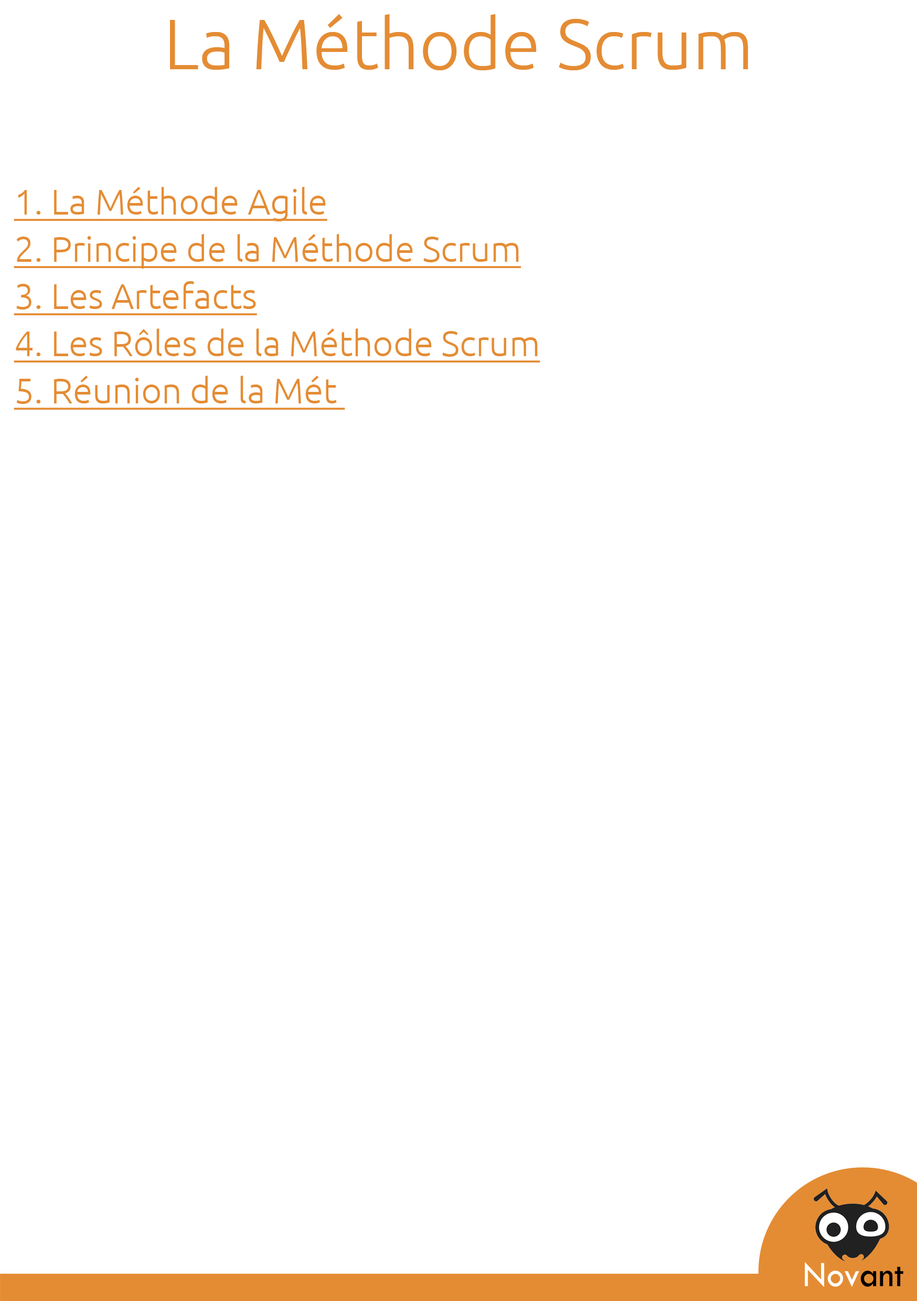
<style>
.page{position:relative;width:917px;height:1301px;background:#ffffff}
.page>*{position:absolute;margin:0}
.t1{font:70.8px "Ubuntu-Light";color:#e48c34}
.t2{font:35.4px "Ubuntu-Light";color:#e48c34;text-decoration:underline}
</style>
<div class="page">
<p class="t1" style="left:170px;top:14px;width:578px;height:56px">La Méthode Scrum</p>
<p class="t2" style="left:14px;top:187px;width:526px;height:223px">1. La Méthode Agile<br>2. Principe de la Méthode Scrum<br>3. Les Artefacts<br>4. Les Rôles de la Méthode Scrum<br>5. Réunion de la Mét</p>
</div>
